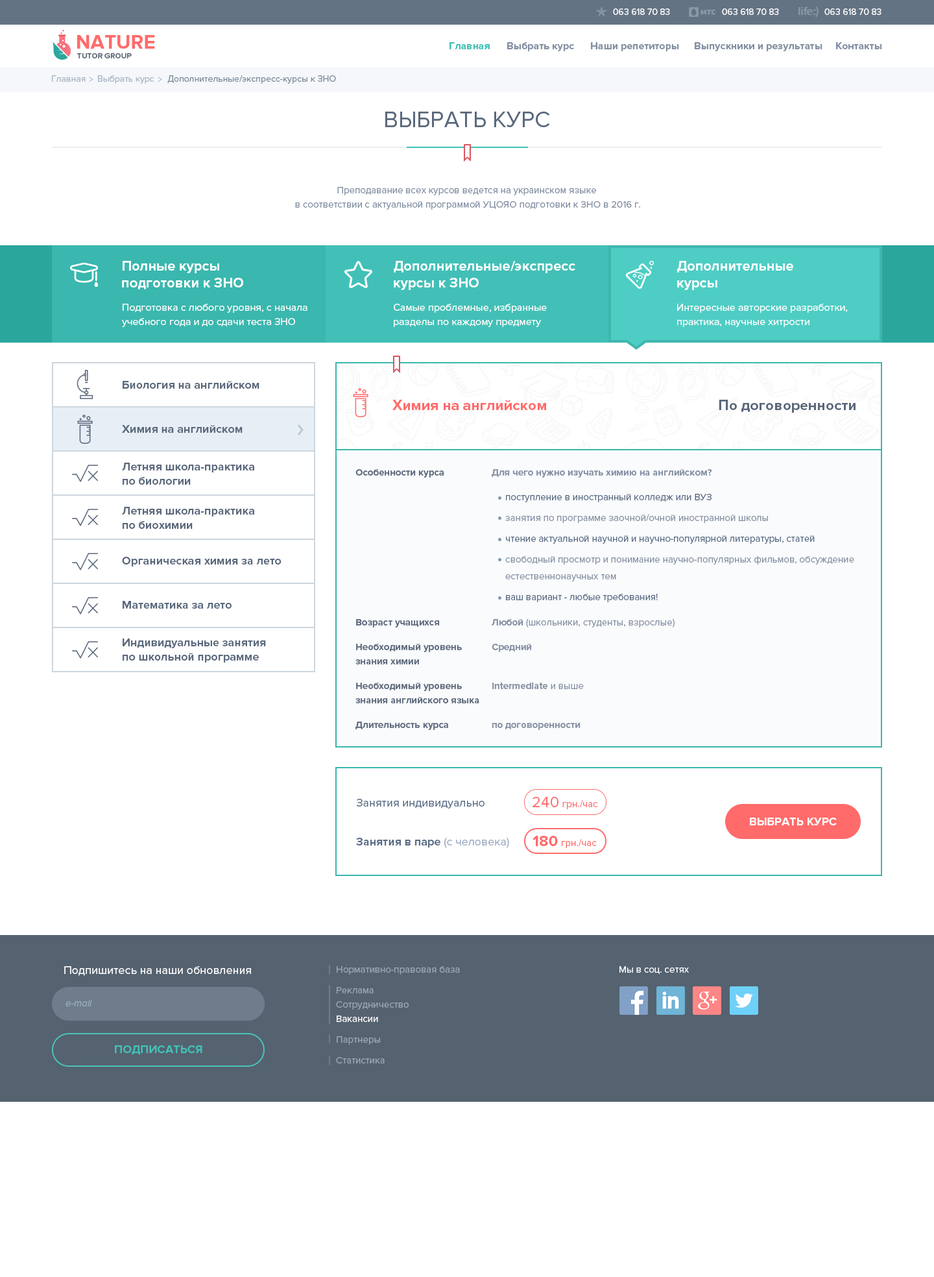
<style>
.page{position:relative;width:934px;height:1277px;background:#ffffff}
.page>*{position:absolute;margin:0}
.t1{font:9.1px "ProximaNova-Regular";color:#ffffff}
.t2{font:20.1px "ProximaNova-Bold";color:#ff6b6b}
.t3{font:7.8px "ProximaNova-Semibold";color:#556270;text-transform:uppercase}
.t4{font:10.4px "ProximaNova-Bold";color:#42c0b7}
.t5{font:10.4px "ProximaNova-Bold";color:#828fa2}
.t6{font:9.1px "ProximaNova-Regular";color:#a8b5c4}
.t7{font:9.1px "ProximaNova-Regular";color:#7d8c9c}
.t8{font:23.4px "ProximaNova-Regular";color:#5a687c;text-transform:uppercase}
.t9{font:9.7px/14.3px "ProximaNova-Regular";color:#828fa2}
.t10{font:14.3px/16.9px "ProximaNova-Bold";color:#ffffff}
.t11{font:10.4px/14.3px "ProximaNova-Regular";color:#ffffff}
.t12{font:11.7px "ProximaNova-Bold";color:#5a687c}
.t13{font:14.9px "ProximaNova-Bold";color:#ff6b6b}
.t14{font:14.9px "ProximaNova-Bold";color:#5a687c}
.t15{font:11.7px/14.3px "ProximaNova-Bold";color:#5a687c}
.t16{font:9.7px "ProximaNova-Bold";color:#5a687c}
.t17{font:9.7px "ProximaNova-Bold";color:#828fa2}
.t18{font:9.7px/20.8px "ProximaNova-Regular";color:#828fa2}
.t19{font:9.7px/16.9px "ProximaNova-Regular";color:#556883}
.t20{font:9.7px/20.8px "ProximaNova-Regular";color:#556883}
.t21{font:9.7px/16.9px "ProximaNova-Regular";color:#828fa2}
.t22{font:9.7px "ProximaNova-Regular";color:#828fa2}
.t23{font:9.7px/16.9px "ProximaNova-Bold";color:#5a687c}
.t24{font:9.7px/14.3px "ProximaNova-Bold";color:#5a687c}
.t25{font:9.7px "ProximaNova-Regular";color:#ff6b6b}
.t26{font:15.6px "ProximaNova-Regular";color:#ff6b6b}
.t27{font:11.7px "ProximaNova-Regular";color:#596c86}
.t28{font:11.7px "ProximaNova-Bold";color:#ffffff}
.t29{font:11.7px "ProximaNova-Bold";color:#596c86}
.t30{font:11.7px "ProximaNova-Regular";color:#9aabc2}
.t31{font:15.6px "ProximaNova-Bold";color:#ff6b6b}
.t32{font:11.7px "ProximaNova-Regular";color:#ffffff}
.t33{font:9.7px/14.3px "ProximaNova-Regular";color:#9ba9b8}
.t34{font:9.7px/20.8px "ProximaNova-Regular";color:#9ba9b8}
.t35{font:9.7px/14.3px "ProximaNova-Regular";color:#fefeff}
.t36{font:9.7px "ProximaNova-Regular";color:#ffffff}
.t37{font:9.7px "ProximaNova-RegularIt";color:#9faebe}
.t38{font:11.7px "ProximaNova-Bold";color:#42c0b7;text-transform:uppercase}
</style>
<div class="page">
<p class="t1" style="left:613px;top:8px;width:57px;height:7px">063 618 70 83</p>
<p class="t1" style="left:722px;top:8px;width:57px;height:7px">063 618 70 83</p>
<p class="t1" style="left:824px;top:8px;width:58px;height:7px">063 618 70 83</p>
<p class="t2" style="left:77px;top:35px;width:78px;height:14px">NATURE</p>
<p class="t3" style="left:77px;top:53px;width:55px;height:5px">Tutor group</p>
<p class="t4" style="left:450px;top:42px;width:40px;height:7px">Главная</p>
<p class="t5" style="left:507px;top:42px;width:67px;height:9px">Выбрать курс</p>
<p class="t5" style="left:591px;top:42px;width:88px;height:9px">Наши репетиторы</p>
<p class="t5" style="left:695px;top:42px;width:128px;height:9px">Выпускники и результаты</p>
<p class="t5" style="left:836px;top:42px;width:46px;height:7px">Контакты</p>
<p class="t6" style="left:52px;top:75px;width:34px;height:7px">Главная</p>
<p class="t6" style="left:98px;top:75px;width:56px;height:9px">Выбрать курс</p>
<p class="t7" style="left:167px;top:75px;width:169px;height:9px">Дополнительные/экспресс-курсы к ЗНО</p>
<p class="t8" style="left:385px;top:112px;width:165px;height:15px">Выбрать куpс</p>
<p class="t9" style="left:295px;top:187px;width:345px;height:23px;text-align:center">Преподавание всех курсов ведется на украинском языке<br> в соответствии с актуальной программой УЦОЯО подготовки к ЗНО в 2016 г.</p>
<p class="t10" style="left:122px;top:261px;width:121px;height:28px">Полные курсы <br>подготовки к ЗНО</p>
<p class="t10" style="left:394px;top:261px;width:181px;height:29px">Дополнительные/экспресс<br>курсы к ЗНО</p>
<p class="t10" style="left:677px;top:261px;width:116px;height:29px">Дополнительные <br>курсы</p>
<p class="t11" style="left:122px;top:304px;width:185px;height:23px">Подготовка с любого уровня, с начала <br>учебного года и до сдачи теста ЗНО</p>
<p class="t11" style="left:394px;top:304px;width:153px;height:23px">Cамые проблемные, избранные <br>разделы по каждому предмету</p>
<p class="t11" style="left:677px;top:304px;width:171px;height:23px">Интересные авторские разработки, <br>практика, научные хитрости</p>
<p class="t12" style="left:123px;top:381px;width:136px;height:8px">Биология на английском</p>
<p class="t13" style="left:392px;top:400px;width:154px;height:10px">Химия на английском</p>
<p class="t14" style="left:719px;top:400px;width:137px;height:13px">По договоренности</p>
<p class="t12" style="left:122px;top:425px;width:121px;height:8px">Химия на английском</p>
<p class="t15" style="left:122px;top:463px;width:132px;height:22px">Летняя школа-практика<br>по биологии</p>
<p class="t16" style="left:355px;top:469px;width:89px;height:8px">Особенности курса</p>
<p class="t17" style="left:492px;top:469px;width:220px;height:8px">Для чего нужно изучать химию на английском?</p>
<p class="t18" style="left:505px;top:494px;width:349px;height:108px"><span class="t19">поступление в иностранный колледж или ВУЗ<br></span>занятия по программе заочной/очной иностранной школы<br><span class="t20">чтение актуальной научной и научно-популярной литературы, статей<br></span>свободный просмотр и понимание научно-популярных фильмов, обсуждение <span class="t21">естественнонаучных тем<br></span><span class="t20">ваш вариант - любые требования!</span></p>
<p class="t15" style="left:122px;top:507px;width:132px;height:22px">Летняя школа-практика<br>по биохимии</p>
<p class="t12" style="left:122px;top:557px;width:160px;height:9px">Органическая химия за лето</p>
<p class="t12" style="left:123px;top:601px;width:109px;height:7px">Математика за лето</p>
<p class="t16" style="left:356px;top:619px;width:84px;height:8px">Возраст учащихся</p>
<p class="t22" style="left:492px;top:618px;width:183px;height:9px"><span class="t17">Любой </span>(школьники, студенты, взрослые)</p>
<p class="t15" style="left:123px;top:638px;width:143px;height:24px">Индивидуальные занятия<br>по школьной программе</p>
<p class="t23" style="left:355px;top:643px;width:107px;height:21px">Необходимый уровень <br><span class="t24">знания химии</span></p>
<p class="t17" style="left:492px;top:643px;width:40px;height:9px">Средний</p>
<p class="t24" style="left:355px;top:682px;width:124px;height:21px">Необходимый уровень <br>знания английского языка</p>
<p class="t17" style="left:492px;top:682px;width:92px;height:7px">Intermediate <span class="t22">и выше</span></p>
<p class="t16" style="left:355px;top:721px;width:93px;height:9px">Длительность курса</p>
<p class="t17" style="left:492px;top:723px;width:89px;height:7px">по договоренности</p>
<p class="t25" style="left:533px;top:797px;width:64px;height:12px"><span class="t26">240 </span>грн./час</p>
<p class="t27" style="left:356px;top:799px;width:129px;height:9px">Занятия индивидуально</p>
<p class="t28" style="left:750px;top:817px;width:87px;height:8px">ВЫБРАТЬ КУРС</p>
<p class="t29" style="left:356px;top:837px;width:153px;height:11px">Занятия в паре <span class="t30">(с человека)</span></p>
<p class="t25" style="left:533px;top:835px;width:64px;height:13px"><span class="t31">180 </span>грн./час</p>
<p class="t32" style="left:64px;top:966px;width:187px;height:10px">Подпишитесь на наши обновления</p>
<p class="t33" style="left:336px;top:966px;width:124px;height:97px">Нормативно-правовая база<br><span class="t34">Реклама<br></span>Cотрудничество<br><span class="t35">Вакансии <br></span><span class="t34">Партнеры<br>Статистика</span></p>
<p class="t36" style="left:619px;top:966px;width:70px;height:8px">Мы в соц. сетях</p>
<p class="t37" style="left:66px;top:1000px;width:26px;height:6px">e-mail</p>
<p class="t38" style="left:115px;top:1045px;width:87px;height:10px">Подписаться</p>
</div>
